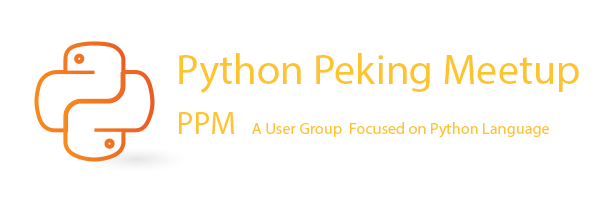
<style>
.page{position:relative;width:601px;height:203px;background:#ffffff}
.page>*{position:absolute;margin:0}
.t1{font:42.4px "MyriadPro-Regular";color:#fec42d}
.t2{font:31.9px "MyriadPro-Regular";color:#fec42d}
.t3{font:16.3px "MyriadPro-Regular";color:#fec42d}
</style>
<div class="page">
<p class="t1" style="left:179px;top:53px;width:400px;height:40px">Python Peking Meetup</p>
<p class="t2" style="left:179px;top:112px;width:55px;height:22px">PPM</p>
<p class="t3" style="left:252px;top:122px;width:297px;height:16px">A User Group  Focused on Python Language</p>
</div>
